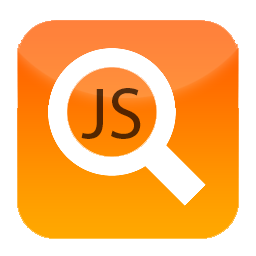
<style>
.page{position:relative;width:256px;height:256px;background:#ffffff}
.page>*{position:absolute;margin:0}
.t1{font:72px "MyriadPro-Regular";color:#542600}
</style>
<div class="page">
<p class="t1" style="left:81px;top:88px;width:60px;height:51px">JS</p>
</div>
